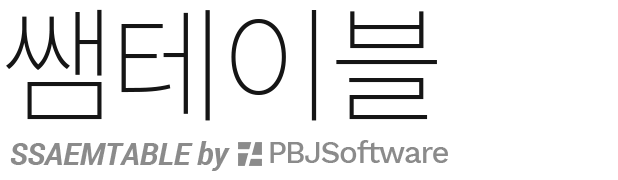
<style>
.page{position:relative;width:618px;height:180px;background:#ffffff}
.page>*{position:absolute;margin:0}
.t1{font:125.4px "SpoqaHanSans-Thin";letter-spacing:-0.05em;color:#151515}
.t2{font:30.6px "Roboto-BoldItalic";letter-spacing:-0.01em;color:#8b8b8b}
.t3{font:30.6px "WorkSans-Medium";letter-spacing:-0.05em;color:#8b8b8b}
</style>
<div class="page">
<p class="t1" style="left:6px;top:9px;width:431px;height:112px">쌤테이블</p>
<p class="t2" style="left:10px;top:141px;width:220px;height:30px">SSAEMTABLE by</p>
<p class="t3" style="left:270px;top:140px;width:178px;height:23px">PBJSoftware</p>
</div>
